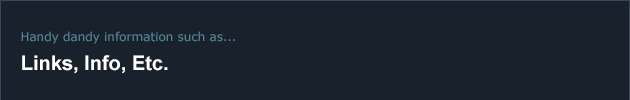
<style>
.page{position:relative;width:630px;height:100px;background:#19222c}
.page>*{position:absolute;margin:0}
.t1{font:12px "Verdana";color:#538092}
.t2{font:20px "Arial-BoldMT";color:#ffffff}
</style>
<div class="page">
<p class="t1" style="left:21px;top:31px;width:214px;height:13px">Handy dandy information such as...</p>
<p class="t2" style="left:22px;top:55px;width:146px;height:19px">Links, Info, Etc.</p>
</div>
